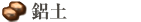
<style>
.page{position:relative;width:141px;height:22px;background:#ffffff}
.page>*{position:absolute;margin:0}
.t1{font:18px "RyuminPr6N-ExBold";color:#4b4742}
</style>
<div class="page">
<p class="t1" style="left:31px;top:2px;width:36px;height:18px">鋁土</p>
</div>
